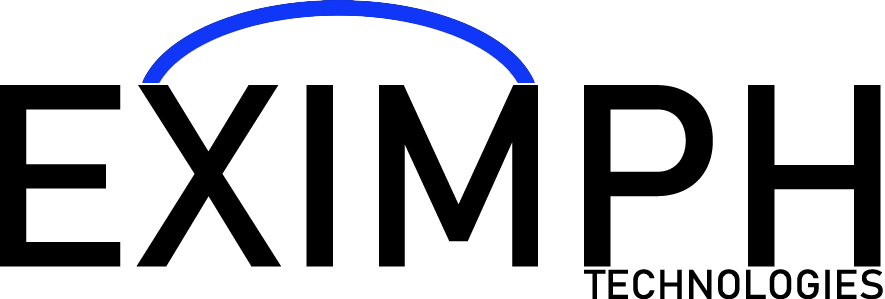
<style>
.page{position:relative;width:885px;height:299px;background:#ffffff}
.page>*{position:absolute;margin:0}
.t1{font:255.1px "Bahnschrift";color:#000000;scale:1.03 1}
.t2{font:40.9px "Bahnschrift";color:#000000;scale:1.04 1}
</style>
<div class="page">
<p class="t1" style="left:0px;top:85px;width:881px;height:182px">EXIMPH</p>
<p class="t2" style="left:584px;top:269px;width:299px;height:31px">TECHNOLOGIES</p>
</div>
